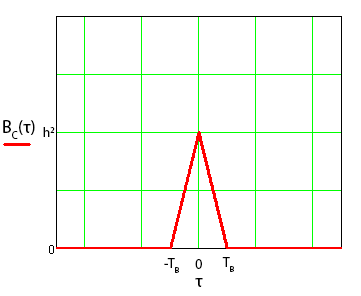
<style>
.page{position:relative;width:361px;height:296px;background:#ffffff}
.page>*{position:absolute;margin:0}
.t1{font:18px "MyriadPro-Regular";color:#000000}
.t2{font:14px "MyriadPro-Regular";color:#000000}
</style>
<div class="page">
<p class="t1" style="left:3px;top:120px;width:32px;height:19px">BC(τ)</p>
<p class="t2" style="left:43px;top:127px;width:12px;height:10px">h2</p>
<p class="t2" style="left:222px;top:257px;width:12px;height:15px">TB</p>
<p class="t2" style="left:164px;top:258px;width:15px;height:15px">-TB</p>
<p class="t2" style="left:195px;top:259px;width:7px;height:10px">0</p>
<p class="t1" style="left:195px;top:278px;width:8px;height:9px">τ</p>
</div>
